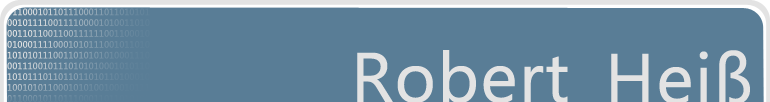
<style>
.page{position:relative;width:770px;height:102px;background:#597d96}
.page>*{position:absolute;margin:0}
.t1{font:70px "MicrosoftTaiLe";color:#e3e3e3;font-weight:bold}
</style>
<div class="page">
<p class="t1" style="left:357px;top:50px;width:211px;height:52px">Robert</p>
<p class="t1" style="left:611px;top:50px;width:139px;height:54px">Heiß</p>
</div>
